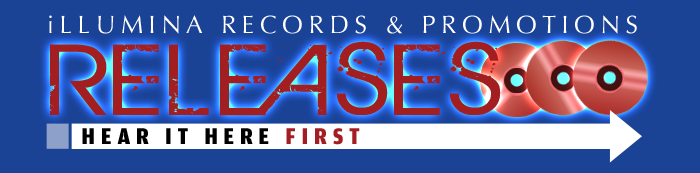
<style>
.page{position:relative;width:700px;height:173px;background:#1a4295}
.page>*{position:absolute;margin:0}
.t1{font:25px "Optima-Regular";letter-spacing:0.225em;color:#ffffff}
.t2{font:110px "BIRTHOFAHERO";letter-spacing:0.05em;color:#a31e22;scale:1.25 1}
.t3{font:24px "AmplitudeComp-Black";letter-spacing:0.2em;color:#000001;text-transform:uppercase;scale:1.25 1}
.t4{font:24px "AmplitudeComp-Black";letter-spacing:0.2em;color:#a31e22;text-transform:uppercase;scale:1.25 1}
</style>
<div class="page">
<p class="t1" style="left:49px;top:15px;width:588px;height:19px">iLLUMINA RECORDS &amp; PROMOTIONS</p>
<p class="t2" style="left:50px;top:41px;width:451px;height:75px">RELEASES</p>
<p class="t3" style="left:82px;top:128px;width:278px;height:17px">hear it here <span class="t4">first</span></p>
</div>
